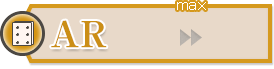
<style>
.page{position:relative;width:274px;height:69px;background:#e8d9c9}
.page>*{position:absolute;margin:0}
.t1{font:36px "RyuminPro-ExBold";color:#cb8e15}
</style>
<div class="page">
<p class="t1" style="left:51px;top:20px;width:56px;height:28px">AR</p>
</div>
